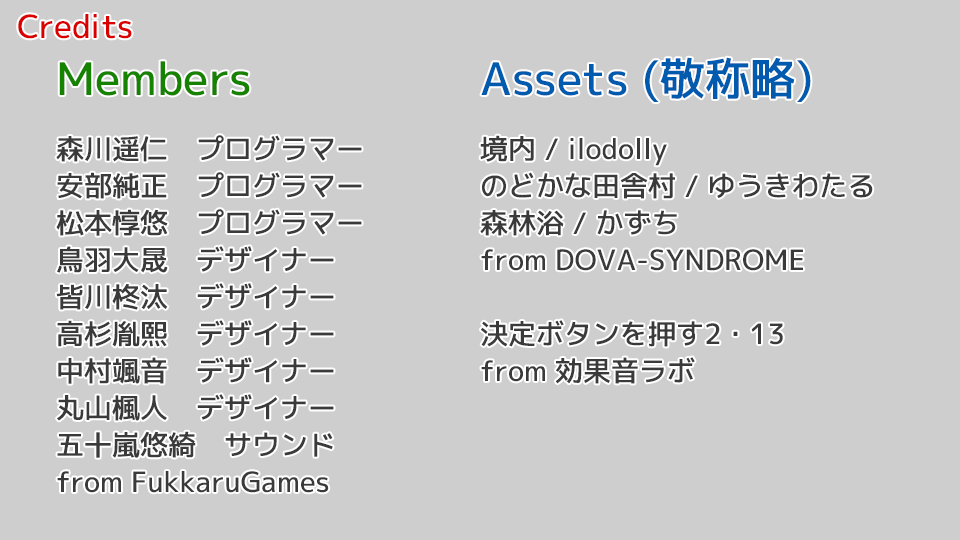
<style>
.page{position:relative;width:960px;height:540px;background:#cecece}
.page>*{position:absolute;margin:0}
.t1{font:32px "mplus-1p-medium";color:#da0000}
.t2{font:28px/37px "mplus-1p-medium";color:#3a3a3a}
.t3{font:45px "mplus-1p-medium";color:#158200}
.t4{font:45px "mplus-1p-medium";color:#005aad}
</style>
<div class="page">
<p class="t1" style="left:18px;top:14px;width:114px;height:25px">Credits</p>
<p class="t2" style="left:56px;top:61px;width:306px;height:432px"><span class="t3">Members<br></span>森川遥仁　プログラマー<br>安部純正　プログラマー<br>松本惇悠　プログラマー<br>鳥羽大晟　デザイナー<br>皆川柊汰　デザイナー<br>高杉胤熙　デザイナー<br>中村颯音　デザイナー<br>丸山楓人　デザイナー<br>五十嵐悠綺　サウンド<br>from FukkaruGames</p>
<p class="t2" style="left:480px;top:57px;width:393px;height:327px"><span class="t4">Assets (敬称略)<br></span>境内 / ilodolly<br>のどかな田舎村 / ゆうきわたる<br>森林浴 / かずち<br>from DOVA-SYNDROME<br><br>決定ボタンを押す2・13<br>from 効果音ラボ</p>
</div>
